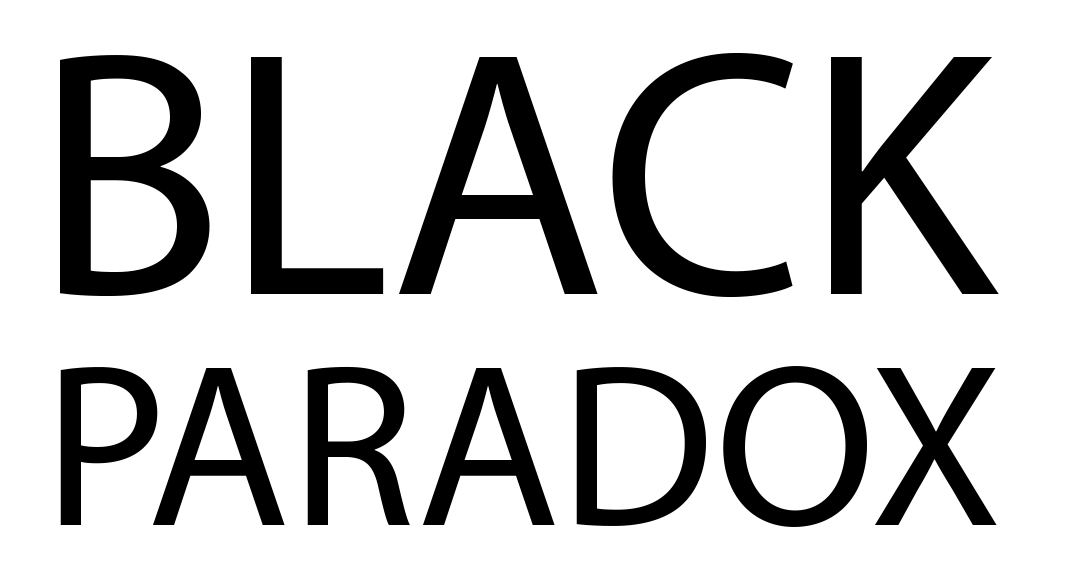
<style>
.page{position:relative;width:1072px;height:587px;background:#ffffff}
.page>*{position:absolute;margin:0}
.t1{font:352.1px "MyriadPro-Regular";color:#000000}
.t2{font:233.3px "MyriadPro-Regular";color:#000000}
</style>
<div class="page">
<p class="t1" style="left:60px;top:52px;width:939px;height:245px">BLACK</p>
<p class="t2" style="left:60px;top:366px;width:937px;height:161px">PARADOX</p>
</div>
